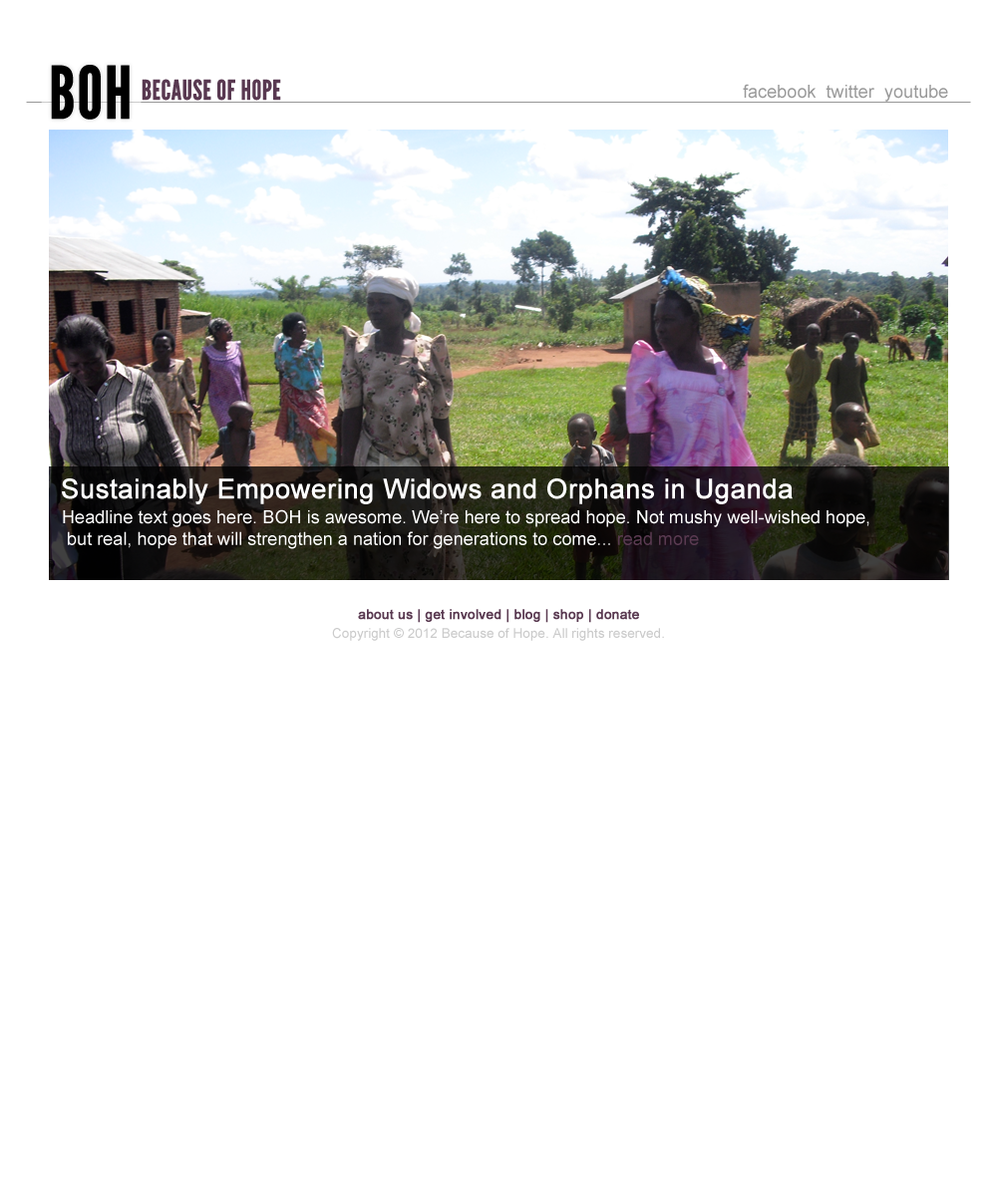
<style>
.page{position:relative;width:997px;height:1196px;background:#ffffff}
.page>*{position:absolute;margin:0}
.t1{font:18.1px "ArialMT";color:#999999}
.t2{font:27.1px "ArialMT";color:#ffffff;font-weight:bold}
.t3{font:18.1px "ArialMT";color:#ffffff}
.t4{font:18.1px "ArialMT";color:#5a3a51}
.t5{font:13.5px "ArialMT";color:#5a3a51;font-weight:bold}
.t6{font:13.5px "ArialMT";color:#cbcbcb}
</style>
<div class="page">
<p class="t1" style="left:743px;top:84px;width:205px;height:18px">facebook  twitter  youtube</p>
<p class="t2" style="left:62px;top:478px;width:730px;height:26px">Sustainably Empowering Widows and Orphans in Uganda</p>
<p class="t3" style="left:63px;top:509px;width:806px;height:40px">Headline text goes here. BOH is awesome. We’re here to spread hope. Not mushy well-wished hope,<br> but real, hope that will strengthen a nation for generations to come... <span class="t4">read more</span></p>
<p class="t5" style="left:358px;top:609px;width:281px;height:14px">about us | get involved | blog | shop | donate</p>
<p class="t6" style="left:332px;top:628px;width:332px;height:13px">Copyright © 2012 Because of Hope. All rights reserved.</p>
</div>
